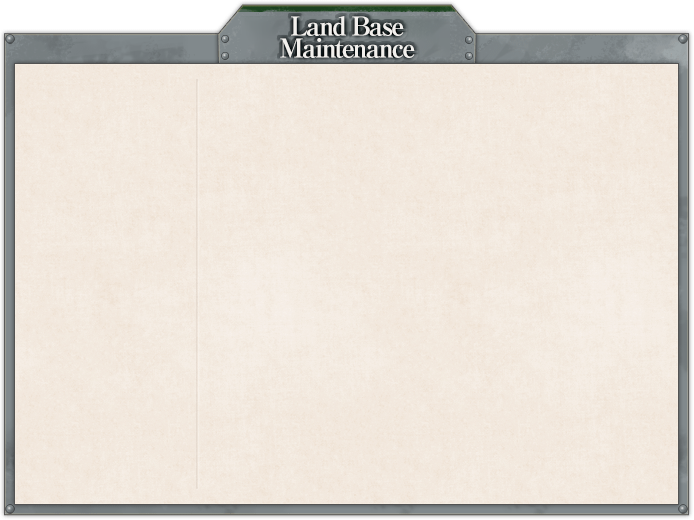
<style>
.page{position:relative;width:694px;height:520px}
.page>*{position:absolute;margin:0}
.t1{font:26px/22px "RyuminPro-ExBold";letter-spacing:-0.08em;color:#f2f0ed}
</style>
<div class="page">
<p class="t1" style="left:280px;top:16px;width:135px;height:42px;text-align:center">Land Base<br>Maintenance</p>
</div>
